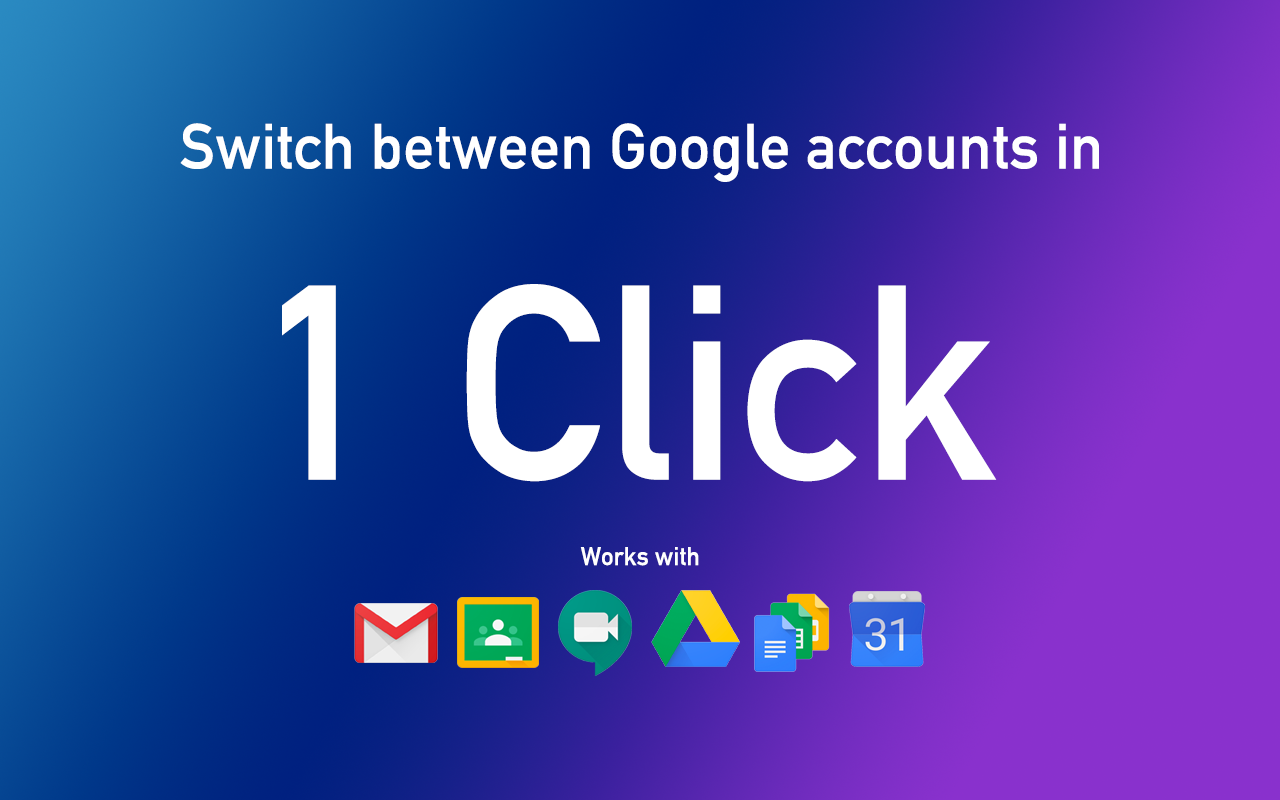
<style>
.page{position:relative;width:1280px;height:800px}
.page>*{position:absolute;margin:0}
.t1{font:62.9px "DINAlternate-Bold";color:#ffffff}
.t2{font:272.3px "DINAlternate-Bold";color:#ffffff}
.t3{font:25.4px "DINAlternate-Bold";color:#ffffff}
</style>
<div class="page">
<p class="t1" style="left:180px;top:123px;width:919px;height:59px">Switch between Google accounts in</p>
<p class="t2" style="left:282px;top:284px;width:715px;height:198px">1 Click</p>
<p class="t3" style="left:580px;top:547px;width:119px;height:19px">Works with</p>
</div>
